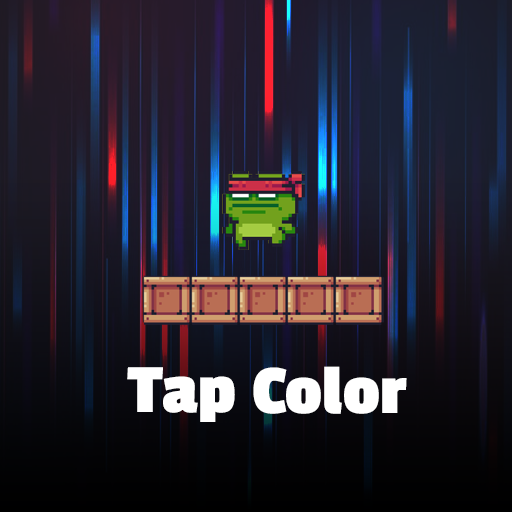
<style>
.page{position:relative;width:512px;height:512px}
.page>*{position:absolute;margin:0}
.t1{font:72.3px "PassionOne-Bold";color:#ffffff}
</style>
<div class="page">
<p class="t1" style="left:253px;top:366px;width:154px;height:48px">Color</p>
<p class="t1" style="left:127px;top:367px;width:108px;height:55px">Tap</p>
</div>
